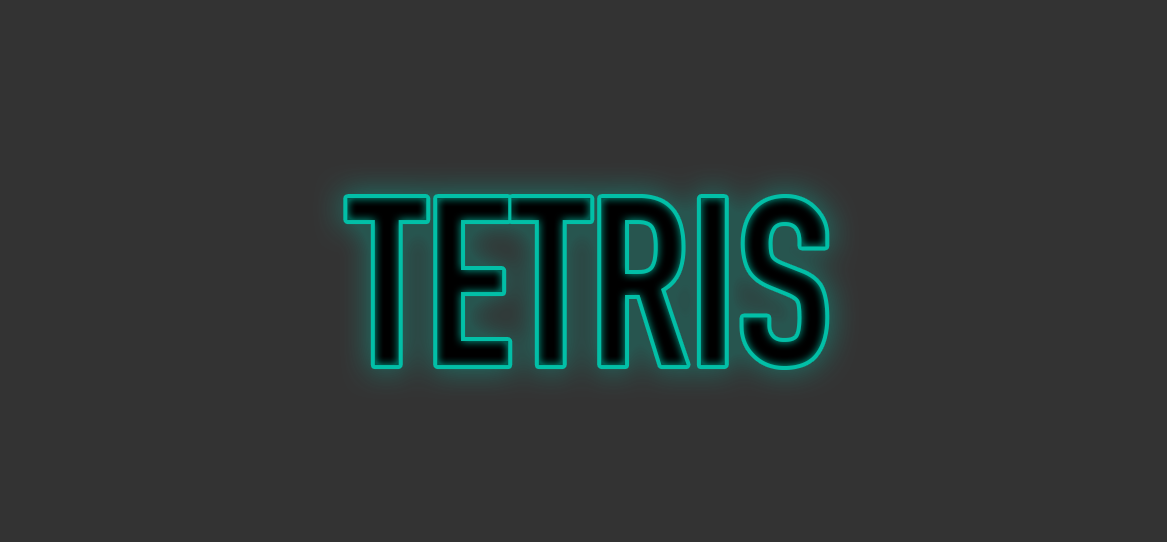
<style>
.page{position:relative;width:1167px;height:542px;background:#333333}
.page>*{position:absolute;margin:0}
.t1{font:233.7px "DINEngschrift";text-transform:uppercase}
</style>
<div class="page">
<p class="t1" style="left:347px;top:198px;width:479px;height:168px">tetris</p>
</div>
